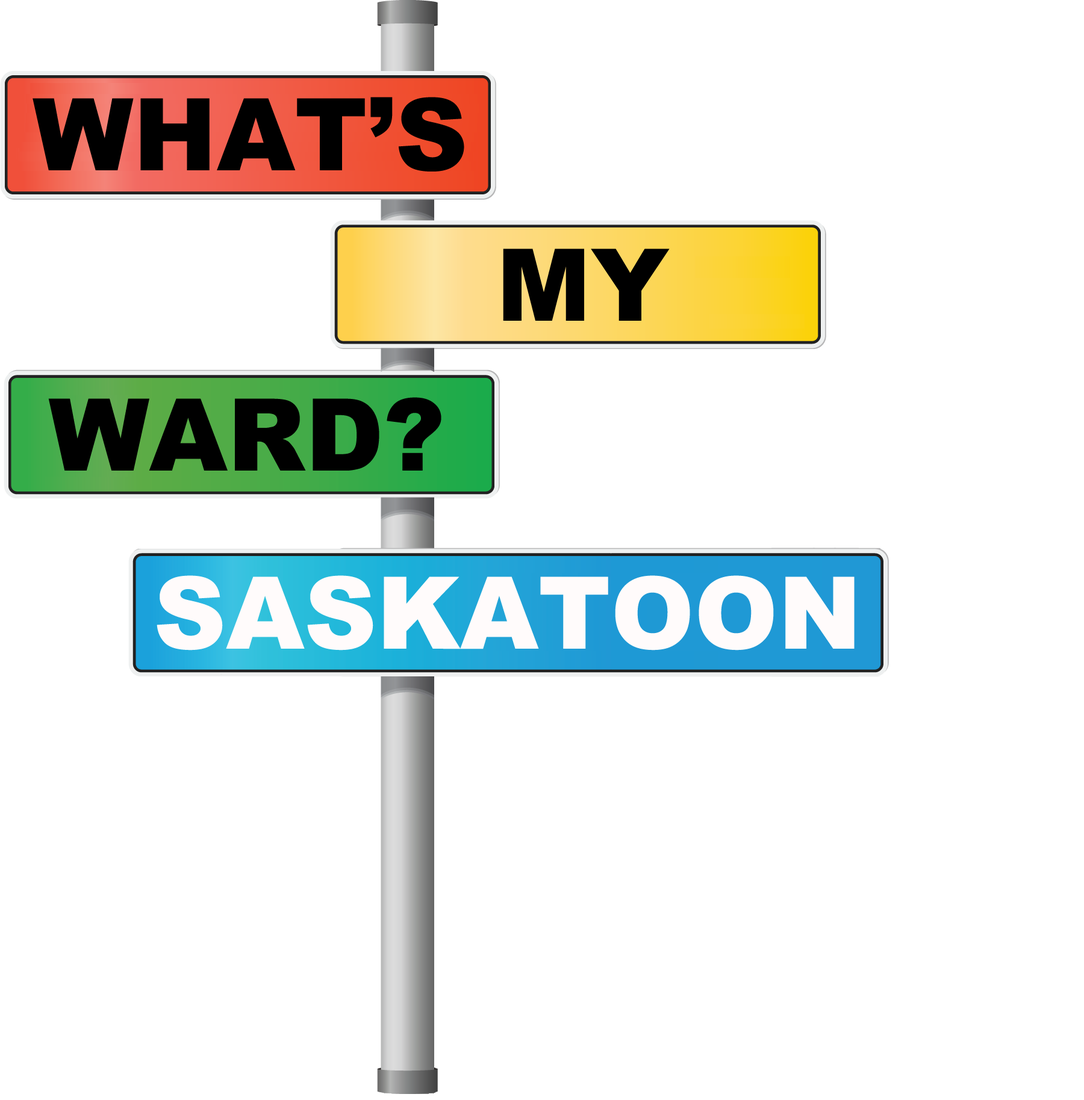
<style>
.page{position:relative;width:1084px;height:1100px;background:#ffffff}
.page>*{position:absolute;margin:0}
.t1{font:100.3px "Arial-Black";color:#000000}
.t2{font:100.3px "Arial-Black";color:#fffbfb}
</style>
<div class="page">
<p class="t1" style="left:33px;top:97px;width:431px;height:75px">WHAT’S</p>
<p class="t1" style="left:503px;top:249px;width:166px;height:72px">MY</p>
<p class="t1" style="left:48px;top:397px;width:393px;height:74px">WARD?</p>
<p class="t2" style="left:157px;top:576px;width:697px;height:75px">SASKATOON</p>
</div>
